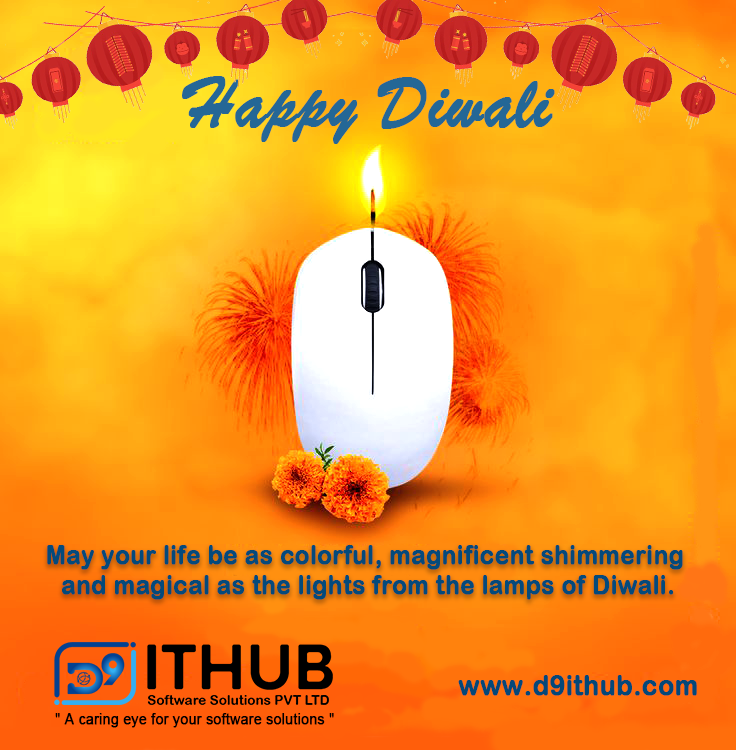
<style>
.page{position:relative;width:736px;height:750px}
.page>*{position:absolute;margin:0}
.t1{font:77px "BrushScriptMT";color:#246796;font-weight:bold;scale:0.93 1}
.t2{font:25.7px/30px "ArialRoundedMTBold";color:#044a7b;font-weight:bold;scale:0.93 1}
.t3{font:27.8px "ArialRoundedMTBold";color:#044878;font-weight:bold;scale:0.93 1}
.t4{font:15px "ArialMT";color:#000000;font-weight:bold;scale:0.93 1}
</style>
<div class="page">
<p class="t1" style="left:182px;top:76px;width:373px;height:68px">Happy Diwali</p>
<p class="t2" style="left:47px;top:545px;width:636px;height:55px;text-align:center">May your life be as colorful, magnificent shimmering <br>and magical as the lights from the lamps of Diwali.</p>
<p class="t3" style="left:458px;top:675px;width:239px;height:21px">www.d9ithub.com</p>
<p class="t4" style="left:55px;top:713px;width:279px;height:15px">" A caring eye for your software solutions "</p>
</div>
